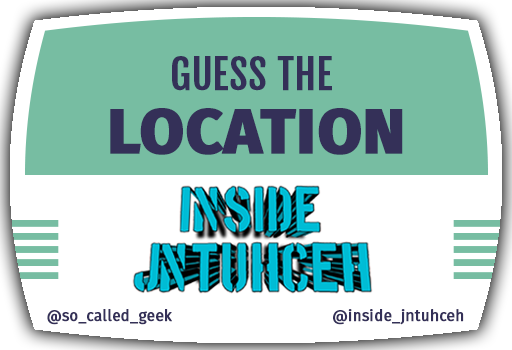
<style>
.page{position:relative;width:512px;height:350px;background:#ffffff}
.page>*{position:absolute;margin:0}
.t1{font:40px "FjallaOne";color:#343058;font-weight:bold}
.t2{font:63.5px "FiraSans-ExtraBold";color:#343058;font-weight:bold}
.t3{font:15.2px "FiraSans-Regular";color:#343058;font-weight:bold}
</style>
<div class="page">
<p class="t1" style="left:172px;top:56px;width:160px;height:35px">GUESS THE</p>
<p class="t2" style="left:110px;top:108px;width:293px;height:47px">LOCATION</p>
<p class="t3" style="left:47px;top:309px;width:125px;height:16px">@so_called_geek</p>
<p class="t3" style="left:333px;top:309px;width:131px;height:16px">@inside_jntuhceh</p>
</div>
